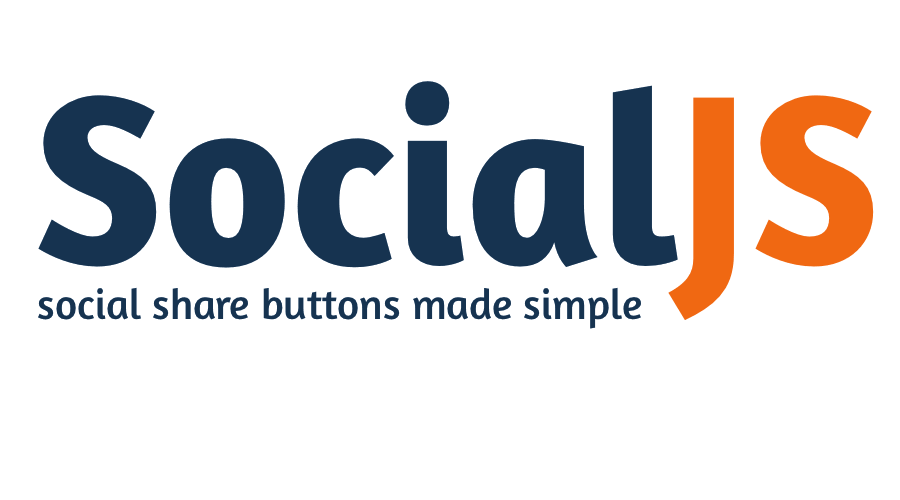
<style>
.page{position:relative;width:900px;height:500px;background:#ffffff}
.page>*{position:absolute;margin:0}
.t1{font:247.3px "Amaranth-Bold";color:#163350}
.t2{font:247.3px "Amaranth-Bold";color:#f06812}
.t3{font:42.9px "Amaranth-Regular";color:#163350}
</style>
<div class="page">
<p class="t1" style="left:38px;top:81px;width:836px;height:239px">Social<span class="t2">JS</span></p>
<p class="t3" style="left:38px;top:287px;width:603px;height:42px">social share buttons made simple</p>
</div>
